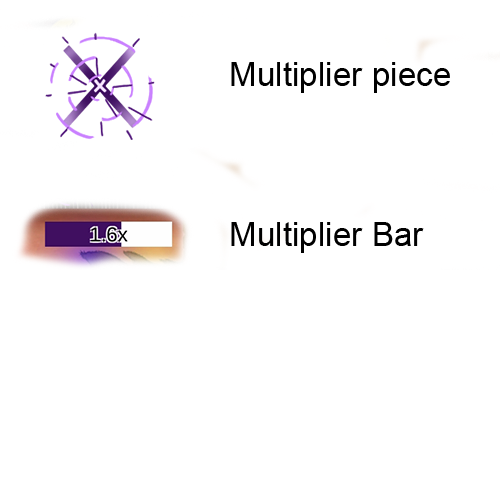
<style>
.page{position:relative;width:500px;height:500px;background:#ffffff}
.page>*{position:absolute;margin:0}
.t1{font:33.3px "ArialMT";color:#000000}
</style>
<div class="page">
<p class="t1" style="left:231px;top:62px;width:219px;height:191px">Multiplier piece<br><br><br><br>Multiplier Bar</p>
</div>
